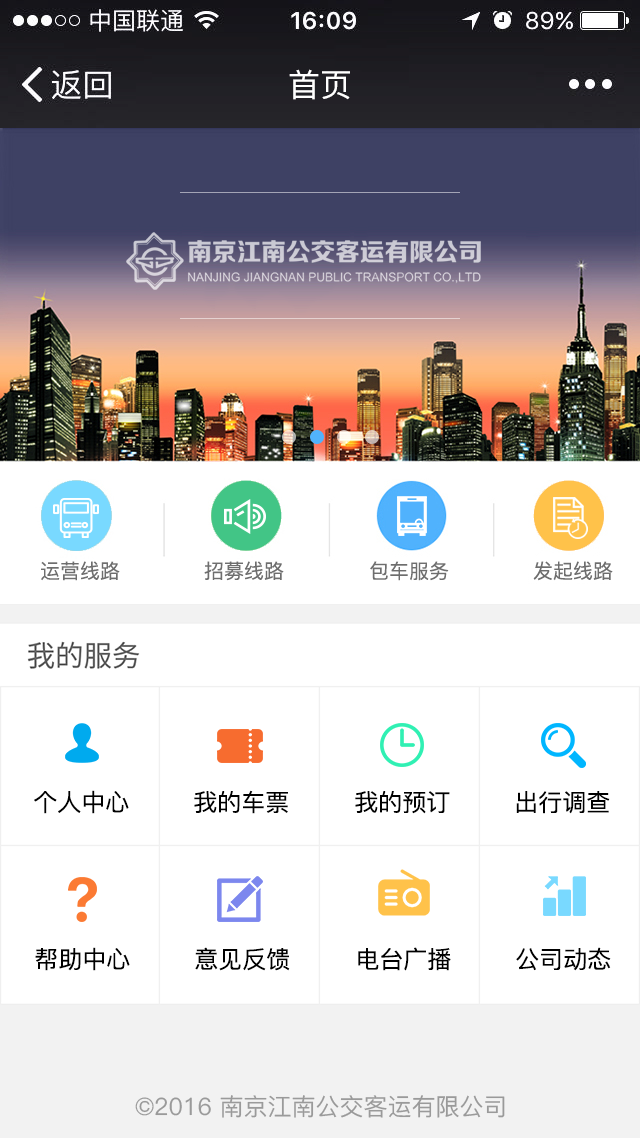
<style>
.page{position:relative;width:640px;height:1138px;background:#ffffff}
.page>*{position:absolute;margin:0}
.t1{font:32px "PingFang-SC-Medium";color:#ffffff}
.t2{font:20px "PingFang-SC-Medium";color:#6e6e6e}
.t3{font:24px "PingFang-SC-Medium";color:#000000}
.t4{font:24px "PingFang-SC-Medium";color:#9a9a9a}
</style>
<div class="page">
<p class="t1" style="left:289px;top:69px;width:61px;height:31px">首页</p>
<p class="t2" style="left:41px;top:561px;width:79px;height:20px">运营线路</p>
<p class="t2" style="left:204px;top:561px;width:80px;height:20px">招募线路</p>
<p class="t2" style="left:370px;top:561px;width:79px;height:20px">包车服务</p>
<p class="t2" style="left:533px;top:561px;width:80px;height:20px">发起线路</p>
<p class="t3" style="left:34px;top:790px;width:95px;height:24px">个人中心</p>
<p class="t3" style="left:194px;top:790px;width:94px;height:24px">我的车票</p>
<p class="t3" style="left:355px;top:791px;width:95px;height:23px">我的预订</p>
<p class="t3" style="left:516px;top:791px;width:94px;height:23px">出行调查</p>
<p class="t3" style="left:35px;top:947px;width:95px;height:24px">帮助中心</p>
<p class="t3" style="left:195px;top:947px;width:95px;height:24px">意见反馈</p>
<p class="t3" style="left:358px;top:947px;width:93px;height:24px">电台广播</p>
<p class="t3" style="left:516px;top:947px;width:95px;height:24px">公司动态</p>
<p class="t4" style="left:135px;top:1095px;width:370px;height:23px">©2016 南京江南公交客运有限公司</p>
</div>
